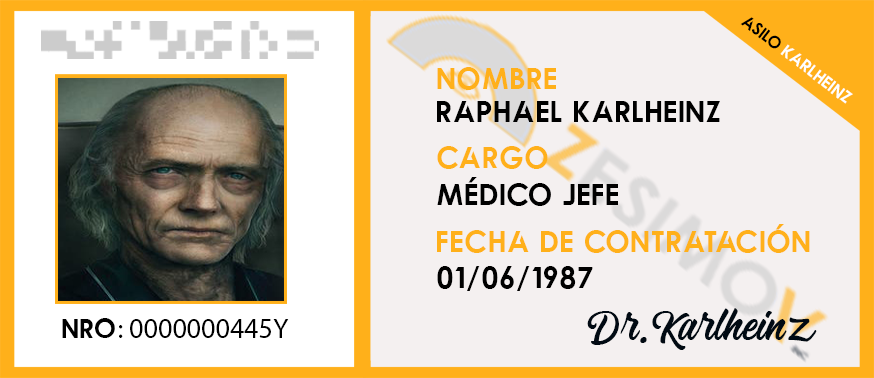
<style>
.page{position:relative;width:874px;height:378px;background:#f4f0f0}
.page>*{position:absolute;margin:0}
.t1{font:17.7px "Qualy-Bold";color:#000000}
.t2{font:17.7px "Qualy-Bold";color:#ffffff}
.t3{font:31.5px "Qualy-Bold";color:#ffb01a}
.t4{font:31.5px "Qualy-Bold";color:#000000}
.t5{font:28px "MyriadPro-Regular";color:#000000}
.t6{font:28px "Qualy-Bold";color:#000000}
.t7{font:42.4px "Blanchope-Regular";color:#010a13}
</style>
<div class="page">
<p class="t1" style="left:740px;top:17px;width:41px;height:32px;rotate:38deg">ASILO</p>
<p class="t2" style="left:780px;top:44px;width:73px;height:60px;rotate:38deg">Karlheinz</p>
<p class="t3" style="left:437px;top:67px;width:119px;height:23px">NOMBREº</p>
<p class="t4" style="left:437px;top:101px;width:283px;height:21px">Raphael Karlheinz</p>
<p class="t3" style="left:437px;top:146px;width:111px;height:23px">CARGOº</p>
<p class="t4" style="left:437px;top:177px;width:181px;height:29px">MÉDICO JEFE</p>
<p class="t3" style="left:437px;top:224px;width:373px;height:29px">FECHA DE CONTRATACIÓNº</p>
<p class="t4" style="left:437px;top:266px;width:156px;height:25px">01/06/1987</p>
<p class="t5" style="left:62px;top:318px;width:227px;height:20px"><span class="t6">NRO</span>: 0000000445Y<span class="t6">º</span></p>
<p class="t7" style="left:587px;top:308px;width:230px;height:42px">Dr.Karlheinz</p>
</div>
